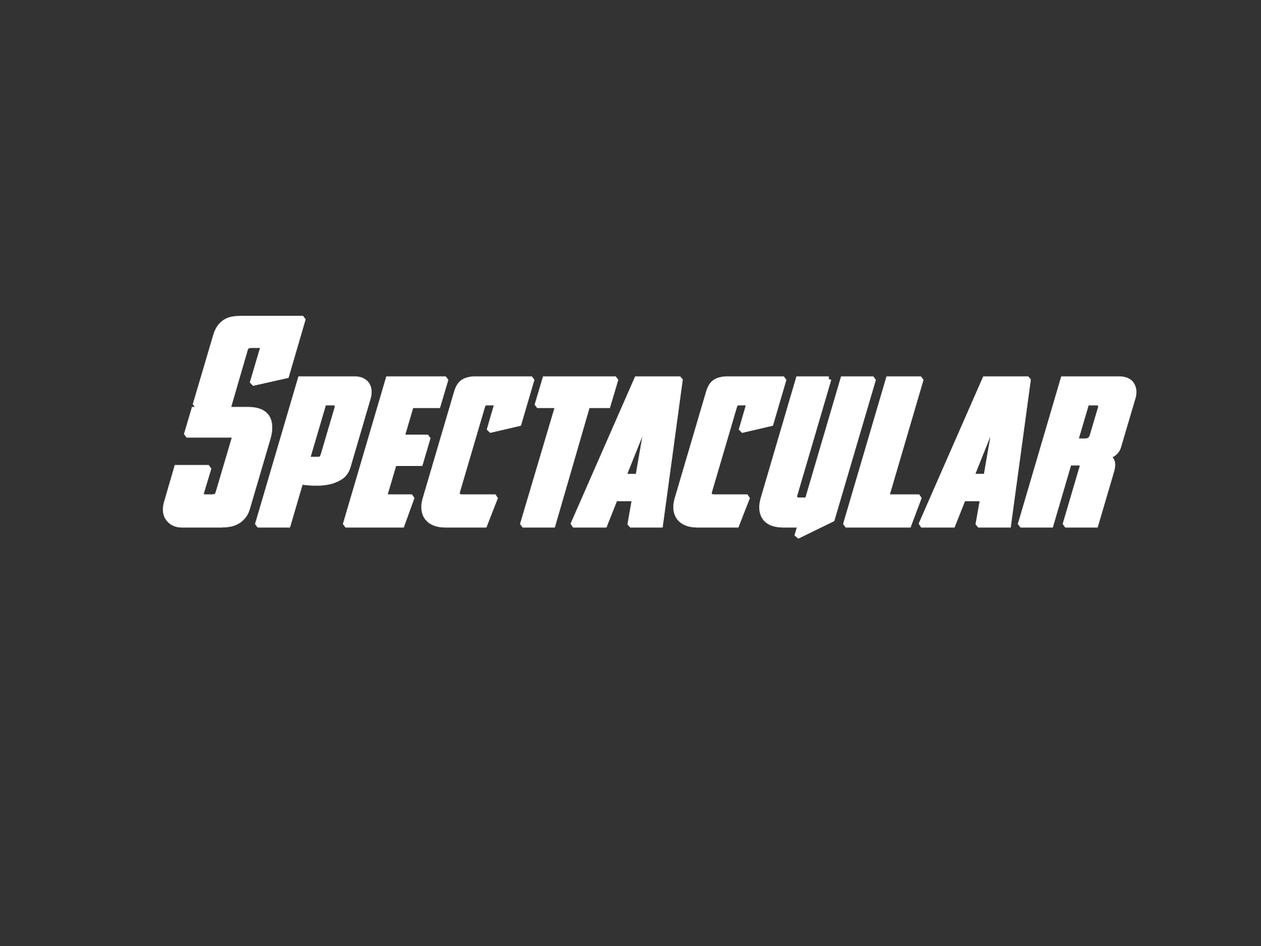
<style>
.page{position:relative;width:1261px;height:946px;background:#333333}
.page>*{position:absolute;margin:0}
.t1{font:200.2px "AvengeanceHeroicAvengerNormal";color:#ffffff;font-weight:bold}
</style>
<div class="page">
<p class="t1" style="left:163px;top:316px;width:974px;height:222px">Spectacular</p>
</div>
